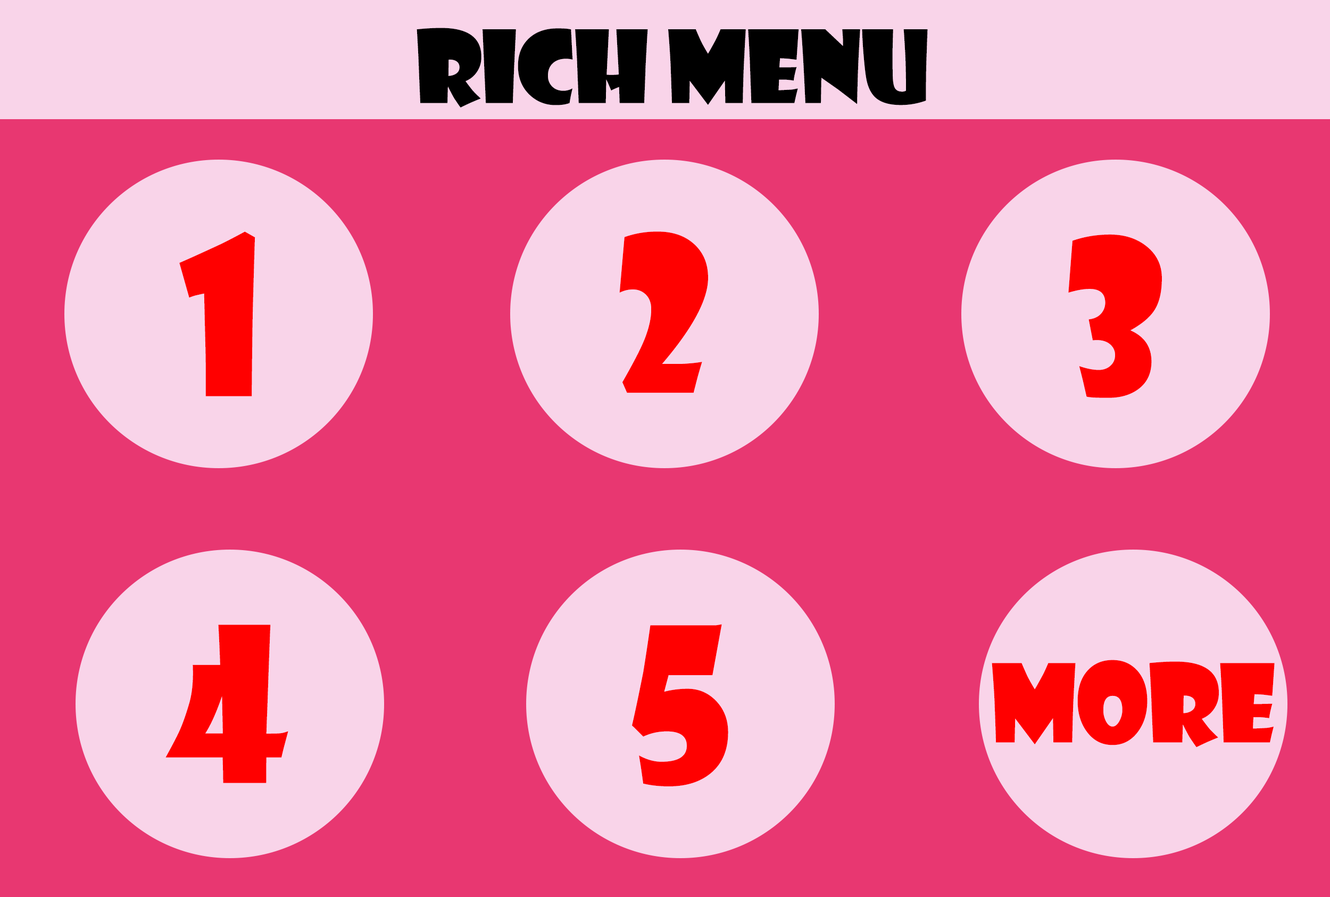
<style>
.page{position:relative;width:1330px;height:897px;background:#e83771}
.page>*{position:absolute;margin:0}
.t1{font:98.1px "ShowcardGothic-Reg";letter-spacing:-0.015em;color:#000000}
.t2{font:210.8px "ShowcardGothic-Reg";letter-spacing:-0.015em;color:#ff0000}
.t3{font:105.6px "ShowcardGothic-Reg";letter-spacing:-0.015em;color:#ff0000}
</style>
<div class="page">
<p class="t1" style="left:416px;top:28px;width:512px;height:79px">Rich Menu</p>
<p class="t2" style="left:179px;top:231px;width:76px;height:165px">1</p>
<p class="t2" style="left:619px;top:231px;width:89px;height:162px">2</p>
<p class="t2" style="left:1068px;top:234px;width:94px;height:164px">3</p>
<p class="t2" style="left:165px;top:624px;width:123px;height:159px">4</p>
<p class="t2" style="left:632px;top:624px;width:96px;height:162px">5</p>
<p class="t3" style="left:991px;top:660px;width:283px;height:87px">MORE</p>
</div>
